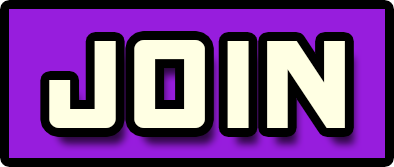
<style>
.page{position:relative;width:394px;height:167px;background:#971ddd}
.page>*{position:absolute;margin:0}
.t1{font:200px "ONRAMP";color:#ffffe3}
</style>
<div class="page">
<p class="t1" style="left:49px;top:40px;width:296px;height:88px">join</p>
</div>
